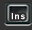
<style>
.page{position:relative;width:32px;height:30px;background:#333333}
.page>*{position:absolute;margin:0}
.t1{font:8.8px "Arial-BoldMT";letter-spacing:0.075em;color:#ffffff}
</style>
<div class="page">
<p class="t1" style="left:11px;top:13px;width:14px;height:7px">Ins</p>
</div>
